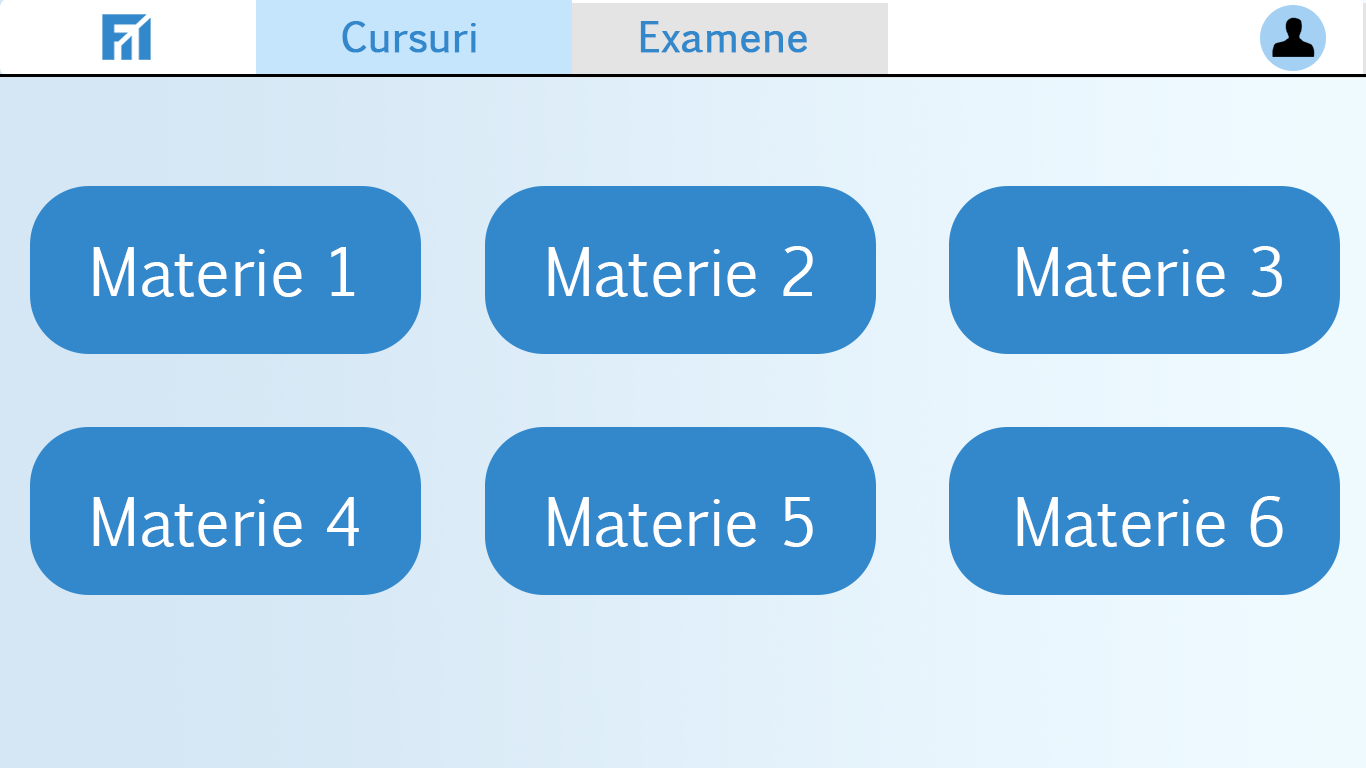
<style>
.page{position:relative;width:1366px;height:768px;background:#3388cb}
.page>*{position:absolute;margin:0}
.t1{font:40px "EuphemiaCAS";color:#3388cb;font-weight:bold}
.t2{font:64px "EuphemiaCAS";color:#ffffff}
</style>
<div class="page">
<p class="t1" style="left:342px;top:21px;width:134px;height:32px">Cursuri</p>
<p class="t1" style="left:640px;top:21px;width:167px;height:32px">Examene</p>
<p class="t2" style="left:548px;top:246px;width:265px;height:51px">Materie 2</p>
<p class="t2" style="left:1017px;top:246px;width:265px;height:51px">Materie 3</p>
<p class="t2" style="left:93px;top:247px;width:262px;height:50px">Materie 1</p>
<p class="t2" style="left:93px;top:497px;width:266px;height:50px">Materie 4</p>
<p class="t2" style="left:548px;top:497px;width:265px;height:50px">Materie 5</p>
<p class="t2" style="left:1017px;top:496px;width:266px;height:51px">Materie 6</p>
</div>
